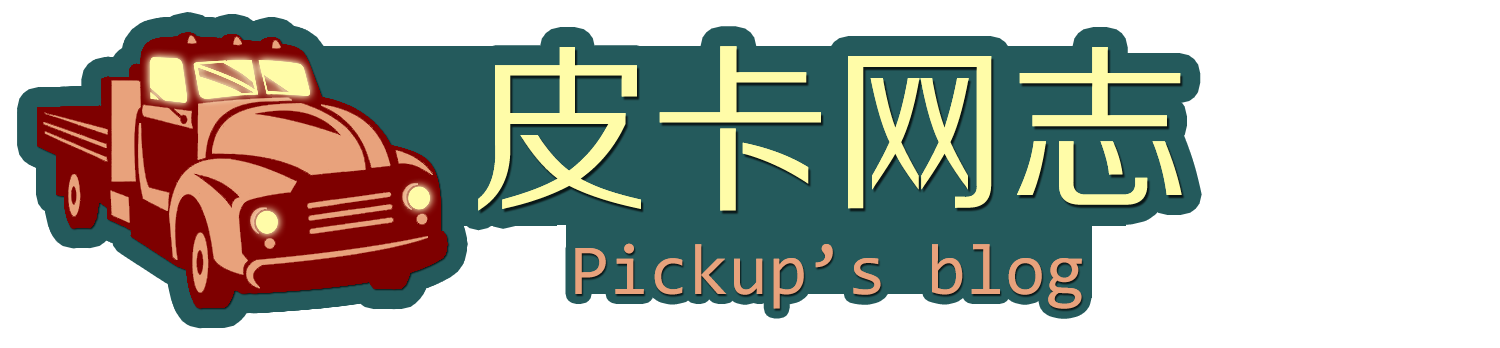
<style>
.page{position:relative;width:1500px;height:348px;background:#ffffff}
.page>*{position:absolute;margin:0}
.t1{font:180px "FZZHJW--GB1-0";color:#fffca8}
.t2{font:72px "Consolas";color:#e7a07b}
</style>
<div class="page">
<p class="t1" style="left:478px;top:46px;width:704px;height:165px">皮卡网志</p>
<p class="t1" style="left:478px;top:46px;width:704px;height:165px">皮卡网志</p>
<p class="t2" style="left:575px;top:243px;width:507px;height:66px">Pickup’s blog</p>
<p class="t2" style="left:575px;top:243px;width:507px;height:66px">Pickup’s blog</p>
</div>
